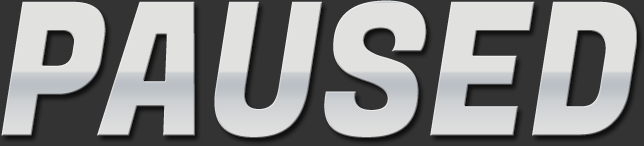
<style>
.page{position:relative;width:644px;height:146px;background:#333333}
.page>*{position:absolute;margin:0}
.t1{font:185.2px "FugazOne-Regular";color:#dfdfdf;scale:0.89 1}
</style>
<div class="page">
<p class="t1" style="left:1px;top:0px;width:636px;height:138px">PAUSED</p>
</div>
